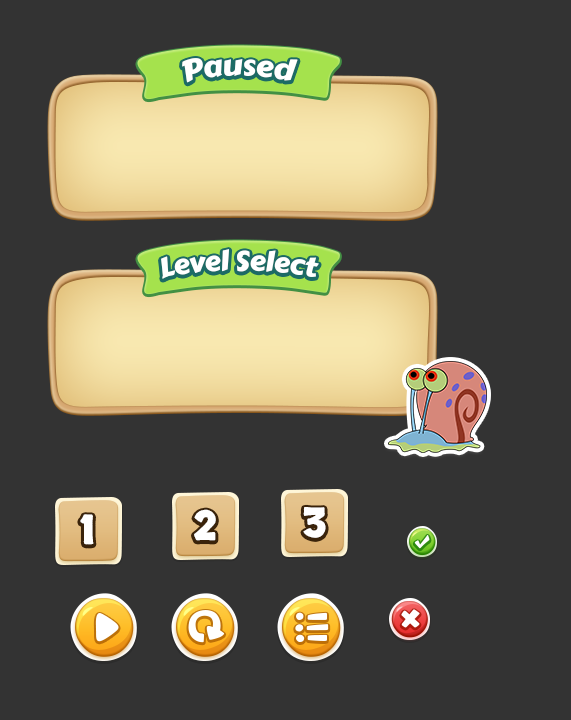
<style>
.page{position:relative;width:571px;height:720px;background:#333333}
.page>*{position:absolute;margin:0}
.t1{font:30px "CarterOne";letter-spacing:-0.02em;color:#ffffff}
.t2{font:28px "CarterOne";letter-spacing:-0.02em;color:#ffffff}
.t3{font:41px "Skranji-Bold";letter-spacing:0.02em;color:#ffffff}
</style>
<div class="page">
<p class="t1" style="left:182px;top:58px;width:116px;height:25px">Paused</p>
<p class="t2" style="left:161px;top:249px;width:158px;height:30px">Level Select</p>
<p class="t3" style="left:194px;top:509px;width:22px;height:32px">2</p>
<p class="t3" style="left:303px;top:507px;width:23px;height:31px">3</p>
<p class="t3" style="left:80px;top:514px;width:14px;height:31px">1</p>
</div>
